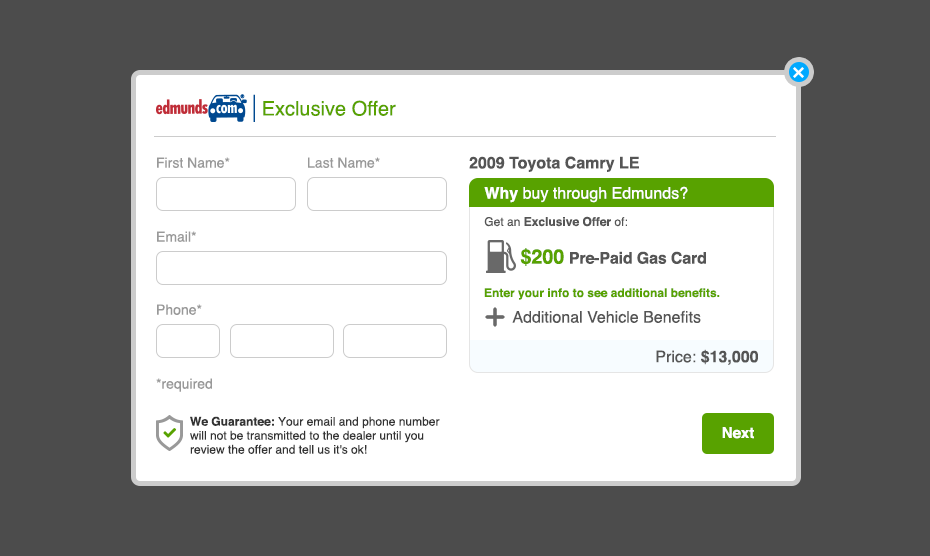
<style>
.page{position:relative;width:930px;height:556px;background:#4c4c4c}
.page>*{position:absolute;margin:0}
.t1{font:20px "Helvetica";color:#58a200}
.t2{font:14px "Helvetica";color:#999999}
.t3{font:16px "Helvetica-Bold";color:#555555}
.t4{font:16px "Helvetica";color:#ffffff}
.t5{font:16px "Helvetica-Bold";color:#ffffff}
.t6{font:12px "Helvetica-Bold";color:#555555}
.t7{font:12px "Helvetica";color:#555555}
.t8{font:16px "Helvetica-Bold";letter-spacing:-0.01em;color:#555555}
.t9{font:20px "Helvetica-Bold";letter-spacing:-0.01em;color:#58a200}
.t10{font:12px "Helvetica-Bold";color:#58a200}
.t11{font:16px "Helvetica";color:#555555}
.t12{font:12px/14px "Helvetica";color:#333333}
.t13{font:12px/14px "Helvetica-Bold";color:#333333}
.t14{font:15px "Helvetica-Bold";color:#ffffff}
</style>
<div class="page">
<p class="t1" style="left:263px;top:100px;width:133px;height:16px">Exclusive Offer</p>
<p class="t2" style="left:157px;top:157px;width:73px;height:11px">First Name*</p>
<p class="t2" style="left:308px;top:157px;width:72px;height:11px">Last Name*</p>
<p class="t3" style="left:469px;top:156px;width:170px;height:16px">2009 Toyota Camry LE</p>
<p class="t4" style="left:484px;top:186px;width:204px;height:17px"><span class="t5">Why </span>buy through Edmunds?</p>
<p class="t6" style="left:484px;top:216px;width:143px;height:11px"><span class="t7">Get an </span>Exclusive Offer<span class="t7"> of:</span></p>
<p class="t2" style="left:157px;top:231px;width:39px;height:11px">Email*</p>
<p class="t8" style="left:520px;top:248px;width:186px;height:18px"><span class="t9">$200 </span>Pre-Paid Gas Card</p>
<p class="t10" style="left:484px;top:288px;width:236px;height:12px">Enter your info to see additional benefits.</p>
<p class="t2" style="left:157px;top:304px;width:45px;height:11px">Phone*</p>
<p class="t11" style="left:512px;top:310px;width:189px;height:13px">Additional Vehicle Benefits</p>
<p class="t3" style="left:656px;top:349px;width:102px;height:16px"><span class="t11">Price: </span>$13,000</p>
<p class="t2" style="left:156px;top:378px;width:56px;height:14px">*required</p>
<p class="t12" style="left:190px;top:416px;width:250px;height:38px"><span class="t13">We Guarantee:</span> Your email and phone number will not be transmitted to the dealer until you review the offer and tell us it's ok!</p>
<p class="t14" style="left:722px;top:427px;width:32px;height:12px">Next</p>
</div>
